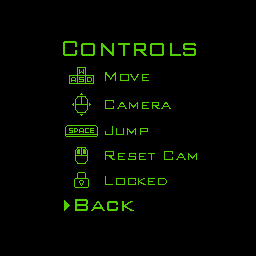
<style>
.page{position:relative;width:256px;height:256px;background:#000000}
.page>*{position:absolute;margin:0}
.t1{font:30px "BankGothicBT-Light";color:#51cf00;scale:0.9 1}
.t2{font:17px "BankGothicBT-Light";color:#51cf00}
.t3{font:24px "BankGothicBT-Light";color:#51cf00}
</style>
<div class="page">
<p class="t1" style="left:63px;top:41px;width:133px;height:15px">Controls</p>
<p class="t2" style="left:105px;top:72px;width:44px;height:9px">Move</p>
<p class="t2" style="left:105px;top:100px;width:66px;height:9px">Camera</p>
<p class="t2" style="left:105px;top:126px;width:43px;height:9px">Jump</p>
<p class="t2" style="left:105px;top:151px;width:92px;height:9px">Reset Cam</p>
<p class="t2" style="left:105px;top:176px;width:62px;height:9px">Locked</p>
<p class="t3" style="left:75px;top:199px;width:59px;height:12px">Back</p>
</div>
